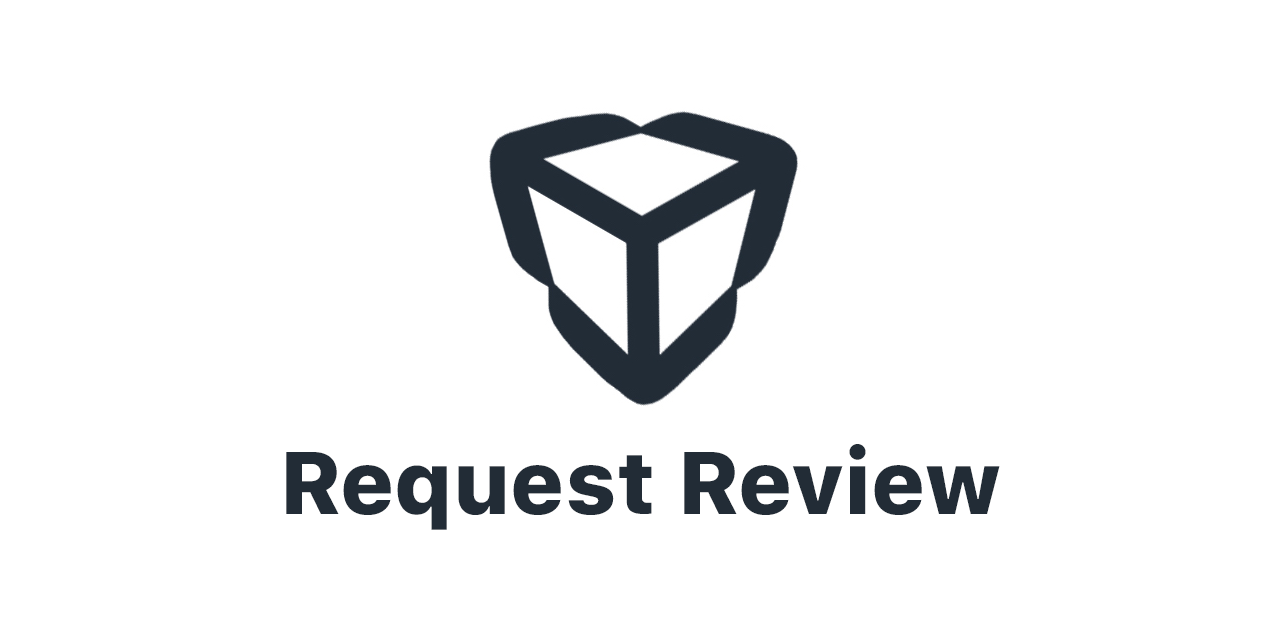
<style>
.page{position:relative;width:1280px;height:640px;background:#ffffff}
.page>*{position:absolute;margin:0}
.t1{font:88px "SFProText-Heavy";color:#222c36}
</style>
<div class="page">
<p class="t1" style="left:286px;top:444px;width:714px;height:86px">Request Review</p>
</div>
